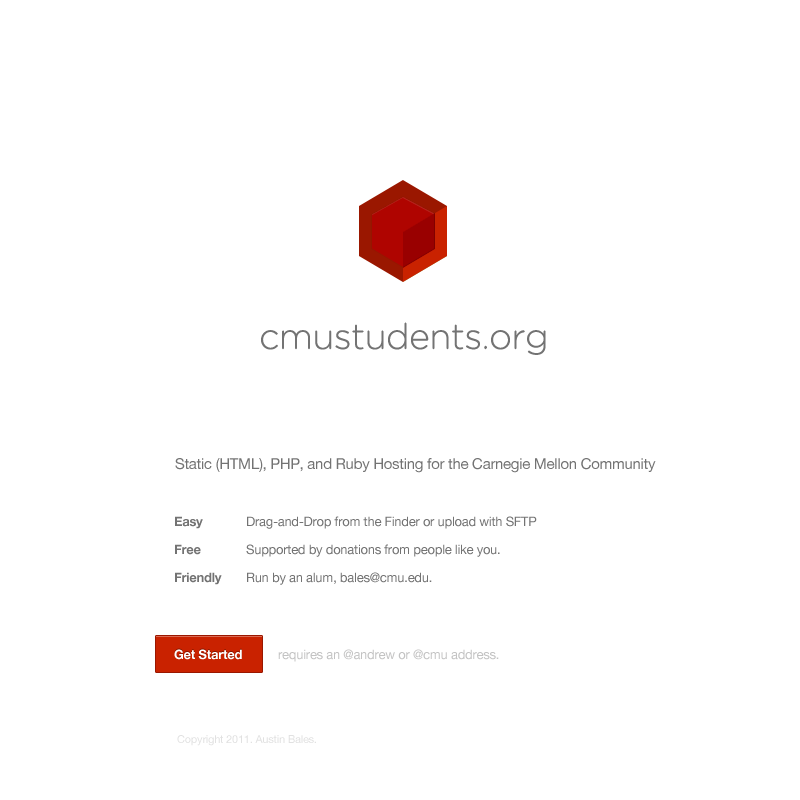
<style>
.page{position:relative;width:800px;height:800px;background:#ffffff}
.page>*{position:absolute;margin:0}
.t1{font:36px "GothamRounded-Light";letter-spacing:-0.02em;color:#737373}
.t2{font:15px "HelveticaNeue";letter-spacing:-0.02em;color:#737373}
.t3{font:13px/28px "HelveticaNeue";letter-spacing:-0.02em;color:#737373}
.t4{font:13px/28px "HelveticaNeue-Bold";letter-spacing:-0.02em;color:#737373}
.t5{font:13px "HelveticaNeue-Bold";letter-spacing:-0.02em;color:#ffffff}
.t6{font:13px "HelveticaNeue";letter-spacing:-0.02em;color:#c3c3c3}
.t7{font:11px "HelveticaNeue";letter-spacing:-0.02em;color:#e1e1e1}
</style>
<div class="page">
<p class="t1" style="left:261px;top:322px;width:285px;height:33px">cmustudents.org</p>
<p class="t2" style="left:175px;top:458px;width:481px;height:15px">Static (HTML), PHP, and Ruby Hosting for the Carnegie Mellon Community</p>
<p class="t3" style="left:175px;top:516px;width:362px;height:69px"><span class="t4">Easy</span>   Drag-and-Drop from the Finder or upload with SFTP<br><span class="t4">Free</span>   Supported by donations from people like you.<br><span class="t4">Friendly</span>  Run by an alum, bales@cmu.edu.</p>
<p class="t5" style="left:174px;top:649px;width:68px;height:11px">Get Started</p>
<p class="t6" style="left:278px;top:649px;width:221px;height:13px">requires an @andrew or @cmu address.</p>
<p class="t7" style="left:177px;top:735px;width:139px;height:11px">Copyright 2011. Austin Bales.</p>
</div>
